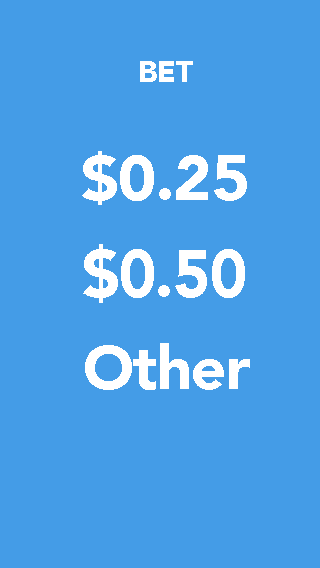
<style>
.page{position:relative;width:320px;height:568px;background:#449ce7}
.page>*{position:absolute;margin:0}
.t1{font:30px "Avenir-Black";letter-spacing:-0.01em;color:#ffffff}
.t2{font:63.2px "Avenir-Black";letter-spacing:-0.01em;color:#ffffff}
.t3{font:66.2px "Avenir-Black";letter-spacing:-0.01em;color:#ffffff;scale:0.95 1}
.t4{font:60.9px "Avenir-Black";letter-spacing:-0.01em;color:#ffffff}
</style>
<div class="page">
<p class="t1" style="left:140px;top:61px;width:53px;height:21px">BET</p>
<p class="t2" style="left:82px;top:151px;width:165px;height:54px">$0.25</p>
<p class="t3" style="left:83px;top:244px;width:162px;height:59px">$0.50</p>
<p class="t4" style="left:85px;top:343px;width:165px;height:47px">Other</p>
</div>
